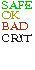
<style>
.page{position:relative;width:35px;height:70px;background:#ffffff}
.page>*{position:absolute;margin:0}
.t1{font:11.1px "Immortal";color:#09b700}
.t2{font:11.1px "Immortal";color:#9b9d00}
.t3{font:11.1px "Immortal";color:#9f3515}
.t4{font:11.1px "Immortal";color:#1f1e1c}
</style>
<div class="page">
<p class="t1" style="left:2px;top:1px;width:30px;height:8px">SAFE</p>
<p class="t2" style="left:2px;top:11px;width:18px;height:8px">OK</p>
<p class="t3" style="left:2px;top:22px;width:26px;height:8px">BAD</p>
<p class="t4" style="left:2px;top:34px;width:30px;height:8px">CRIT</p>
</div>
